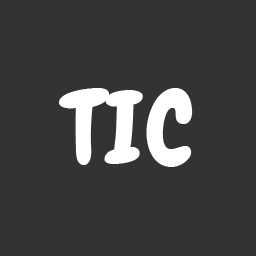
<style>
.page{position:relative;width:256px;height:256px;background:#333333}
.page>*{position:absolute;margin:0}
.t1{font:100px "Chewy-Regular";letter-spacing:0.05em;color:#ffffff}
</style>
<div class="page">
<p class="t1" style="left:59px;top:88px;width:134px;height:79px">TIC</p>
</div>
